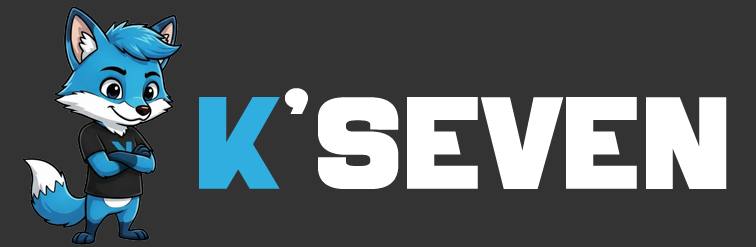
<style>
.page{position:relative;width:756px;height:247px;background:#333333}
.page>*{position:absolute;margin:0}
.t1{font:125.5px "BabellBold";color:#ffffff;scale:1.17 1}
.t2{font:125.5px "BabellBold";color:#30aedf;scale:1.17 1}
</style>
<div class="page">
<p class="t1" style="left:199px;top:88px;width:528px;height:101px"><span class="t2">K</span>’Seven</p>
</div>
